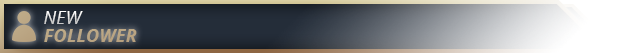
<style>
.page{position:relative;width:618px;height:53px}
.page>*{position:absolute;margin:0}
.t1{font:17.8px "OpenSans-Italic";letter-spacing:0.02em;color:#ebebeb}
.t2{font:17.8px "OpenSans-BoldItalic";letter-spacing:0.02em;color:#bba684}
</style>
<div class="page">
<p class="t1" style="left:44px;top:11px;width:39px;height:13px">NEW</p>
<p class="t2" style="left:44px;top:29px;width:93px;height:13px">FOLLOWER</p>
</div>
